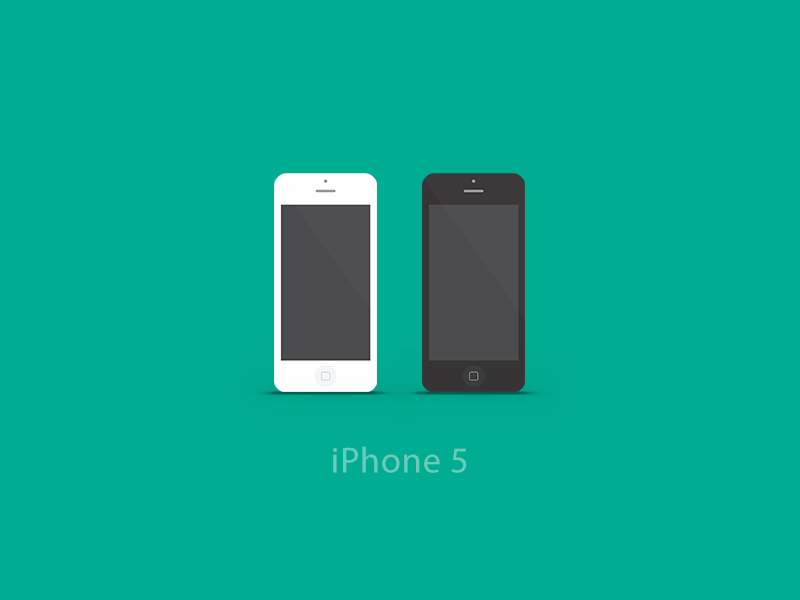
<style>
.page{position:relative;width:800px;height:600px;background:#00ac92}
.page>*{position:absolute;margin:0}
.t1{font:36.4px "MyriadPro-Regular";letter-spacing:0.025em;color:#69ccb9}
</style>
<div class="page">
<p class="t1" style="left:333px;top:446px;width:134px;height:27px">iPhone 5</p>
</div>
